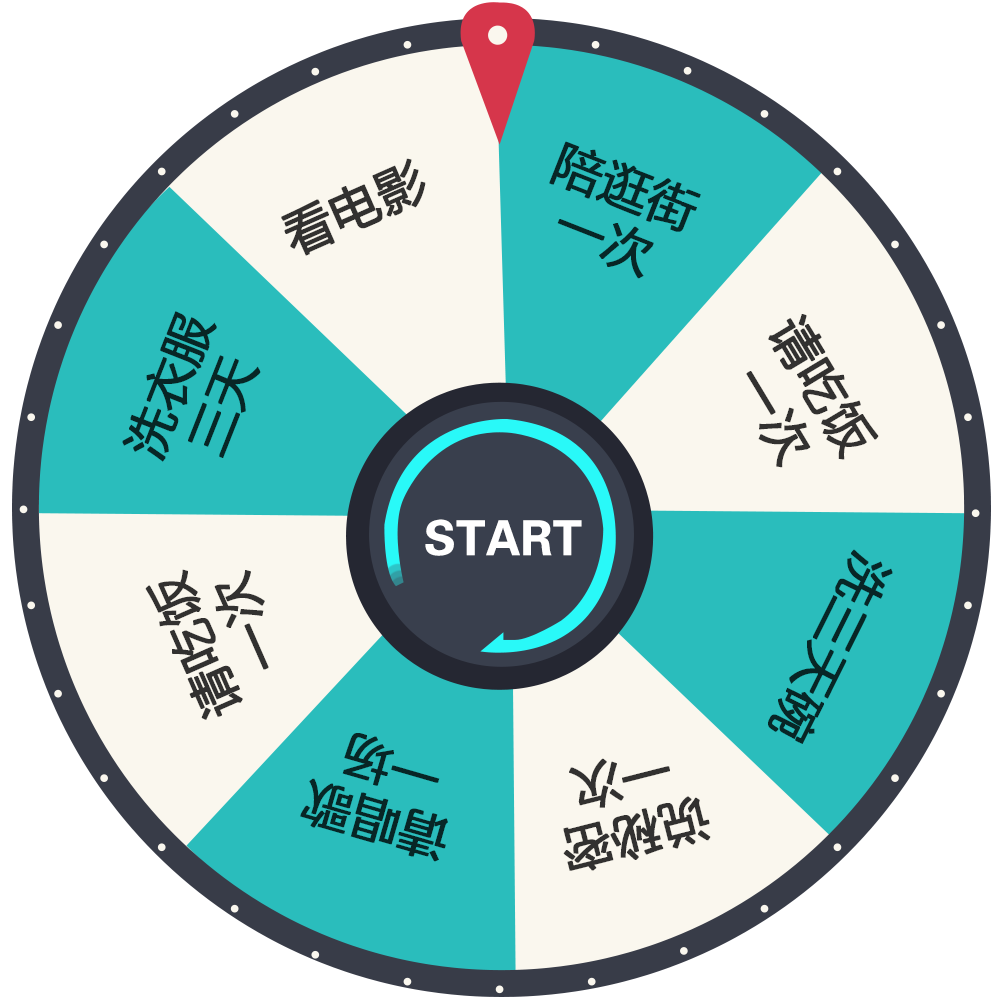
<style>
.page{position:relative;width:1000px;height:1000px;background:#faf7ee}
.page>*{position:absolute;margin:0}
.t1{font:48.8px/57.2px "MicrosoftYaHei";color:#082626;font-weight:bold}
.t2{font:48.8px "MicrosoftYaHei";color:#323130;font-weight:bold}
.t3{font:48.8px/57.2px "MicrosoftYaHei";color:#323130;font-weight:bold}
.t4{font:48px "FZZYJW--GB1-0";letter-spacing:-0.02em;color:#ffffff;font-weight:bold}
.t5{font:48.8px "MicrosoftYaHei";color:#082626;font-weight:bold}
</style>
<div class="page">
<p class="t1" style="left:549px;top:141px;width:152px;height:138px;text-align:center;rotate:21deg">陪逛街<br>一次</p>
<p class="t2" style="left:281px;top:158px;width:145px;height:98px;rotate:-24deg">看电影</p>
<p class="t1" style="left:122px;top:311px;width:139px;height:151px;text-align:center;rotate:-69deg">洗衣服<br>三天</p>
<p class="t3" style="left:746px;top:314px;width:133px;height:154px;text-align:center;rotate:59deg">请吃饭<br>一次</p>
<p class="t4" style="left:425px;top:519px;width:157px;height:37px">START</p>
<p class="t5" style="left:768px;top:549px;width:125px;height:195px;rotate:116deg">洗三天碗</p>
<p class="t3" style="left:145px;top:569px;width:124px;height:151px;text-align:center;rotate:-114deg">请吃饭<br>一次</p>
<p class="t1" style="left:300px;top:733px;width:148px;height:129px;text-align:center;rotate:-164deg">请唱歌<br>一场</p>
<p class="t3" style="left:563px;top:758px;width:148px;height:113px;text-align:center;rotate:166deg">说秘密<br>一次</p>
</div>
